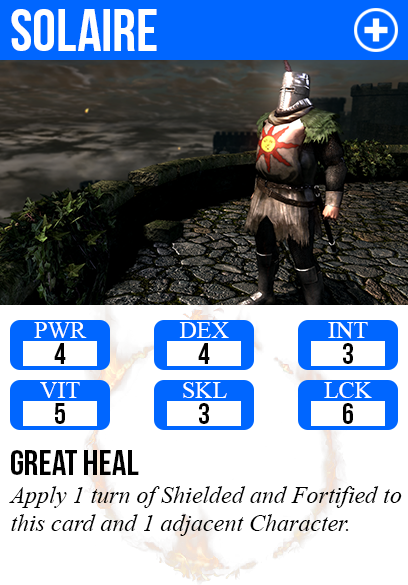
<style>
.page{position:relative;width:408px;height:585px;background:#ffffff}
.page>*{position:absolute;margin:0}
.t1{font:60px "BebasNeue";color:#ffffff}
.t2{font:24px "TimesNewRomanPSMT";color:#ffffff}
.t3{font:30px "BebasNeue";color:#000000}
.t4{font:36px "BebasNeue";color:#000000}
.t5{font:24px "TimesNewRomanPS-ItalicMT";color:#000000}
</style>
<div class="page">
<p class="t1" style="left:11px;top:9px;width:146px;height:42px">solaire</p>
<p class="t2" style="left:34px;top:322px;width:53px;height:16px">PWR</p>
<p class="t2" style="left:179px;top:322px;width:50px;height:16px">DEX</p>
<p class="t2" style="left:328px;top:322px;width:40px;height:17px">INT</p>
<p class="t3" style="left:54px;top:343px;width:12px;height:21px">4</p>
<p class="t3" style="left:198px;top:343px;width:12px;height:21px">4</p>
<p class="t3" style="left:343px;top:343px;width:10px;height:21px">3</p>
<p class="t2" style="left:40px;top:382px;width:40px;height:16px">VIT</p>
<p class="t2" style="left:183px;top:382px;width:44px;height:16px">SKL</p>
<p class="t2" style="left:324px;top:382px;width:48px;height:16px">LCK</p>
<p class="t3" style="left:55px;top:403px;width:10px;height:21px">5</p>
<p class="t3" style="left:199px;top:403px;width:10px;height:21px">3</p>
<p class="t3" style="left:343px;top:403px;width:10px;height:21px">6</p>
<p class="t4" style="left:11px;top:450px;width:128px;height:25px">great heal</p>
<p class="t5" style="left:9px;top:486px;width:393px;height:50px">Apply 1 turn of Shielded and Fortified to<br>this card and 1 adjacent Character.</p>
</div>
